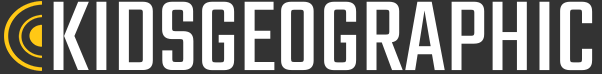
<style>
.page{position:relative;width:602px;height:74px;background:#333333}
.page>*{position:absolute;margin:0}
.t1{font:109px "Teko-Regular";color:#ffffff;text-transform:uppercase}
</style>
<div class="page">
<p class="t1" style="left:53px;top:1px;width:540px;height:70px">KidsGEOGRAPHIC</p>
</div>
